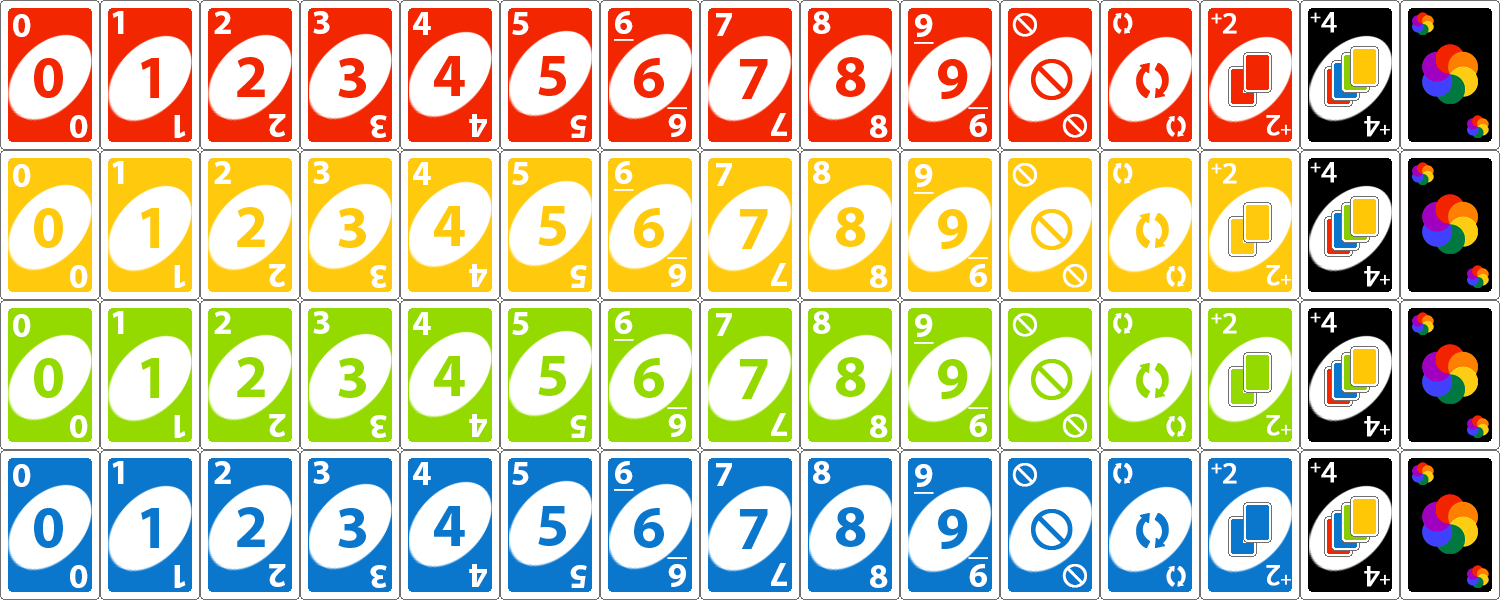
<style>
.page{position:relative;width:1500px;height:600px;background:#ffffff}
.page>*{position:absolute;margin:0}
.t1{font:60px "MyriadPro-Bold";color:#ffffff}
.t2{font:60px "MyriadPro-Bold";color:#ffffff;text-decoration:underline}
.t3{font:30px "MyriadPro-Regular";color:#ffffff;font-weight:bold}
</style>
<div class="page">
<p class="t1" style="left:13px;top:14px;width:18px;height:23px">0</p>
<p class="t1" style="left:112px;top:11px;width:12px;height:23px">1</p>
<p class="t1" style="left:214px;top:11px;width:17px;height:23px">2</p>
<p class="t1" style="left:313px;top:11px;width:17px;height:23px">3</p>
<p class="t1" style="left:413px;top:12px;width:18px;height:23px">4</p>
<p class="t1" style="left:512px;top:12px;width:17px;height:23px">5</p>
<p class="t2" style="left:614px;top:11px;width:20px;height:30px">6</p>
<p class="t1" style="left:716px;top:13px;width:16px;height:23px">7</p>
<p class="t1" style="left:813px;top:11px;width:18px;height:23px">8</p>
<p class="t2" style="left:914px;top:14px;width:20px;height:30px">9</p>
<p class="t3" style="left:1211px;top:13px;width:26px;height:21px">+2</p>
<p class="t2" style="left:667px;top:107px;width:20px;height:30px;rotate:180deg">6</p>
<p class="t1" style="left:771px;top:113px;width:16px;height:23px;rotate:180deg">7</p>
<p class="t2" style="left:968px;top:107px;width:20px;height:30px;rotate:180deg">9</p>
<p class="t1" style="left:70px;top:115px;width:18px;height:23px">0</p>
<p class="t1" style="left:174px;top:115px;width:12px;height:23px;rotate:180deg">1</p>
<p class="t1" style="left:269px;top:114px;width:17px;height:23px;rotate:180deg">2</p>
<p class="t1" style="left:370px;top:115px;width:17px;height:23px;rotate:180deg">3</p>
<p class="t1" style="left:469px;top:114px;width:18px;height:23px;rotate:180deg">4</p>
<p class="t1" style="left:570px;top:115px;width:17px;height:23px;rotate:180deg">5</p>
<p class="t1" style="left:870px;top:115px;width:18px;height:23px">8</p>
<p class="t3" style="left:1266px;top:115px;width:25px;height:21px;rotate:180deg">+2</p>
<p class="t1" style="left:112px;top:161px;width:12px;height:23px">1</p>
<p class="t1" style="left:214px;top:161px;width:17px;height:23px">2</p>
<p class="t1" style="left:313px;top:161px;width:17px;height:23px">3</p>
<p class="t2" style="left:614px;top:161px;width:20px;height:30px">6</p>
<p class="t1" style="left:813px;top:161px;width:18px;height:23px">8</p>
<p class="t1" style="left:13px;top:164px;width:18px;height:23px">0</p>
<p class="t1" style="left:413px;top:162px;width:18px;height:23px">4</p>
<p class="t1" style="left:512px;top:162px;width:17px;height:23px">5</p>
<p class="t1" style="left:716px;top:163px;width:16px;height:23px">7</p>
<p class="t2" style="left:914px;top:164px;width:20px;height:30px">9</p>
<p class="t3" style="left:1211px;top:163px;width:26px;height:21px">+2</p>
<p class="t2" style="left:667px;top:257px;width:20px;height:30px;rotate:180deg">6</p>
<p class="t2" style="left:968px;top:257px;width:20px;height:30px;rotate:180deg">9</p>
<p class="t1" style="left:70px;top:265px;width:18px;height:23px">0</p>
<p class="t1" style="left:174px;top:265px;width:12px;height:23px;rotate:180deg">1</p>
<p class="t1" style="left:269px;top:264px;width:17px;height:23px;rotate:180deg">2</p>
<p class="t1" style="left:370px;top:265px;width:17px;height:23px;rotate:180deg">3</p>
<p class="t1" style="left:469px;top:264px;width:18px;height:23px;rotate:180deg">4</p>
<p class="t1" style="left:570px;top:265px;width:17px;height:23px;rotate:180deg">5</p>
<p class="t1" style="left:771px;top:263px;width:16px;height:23px;rotate:180deg">7</p>
<p class="t1" style="left:870px;top:265px;width:18px;height:23px">8</p>
<p class="t3" style="left:1266px;top:265px;width:25px;height:21px;rotate:180deg">+2</p>
<p class="t1" style="left:13px;top:314px;width:18px;height:23px">0</p>
<p class="t1" style="left:112px;top:311px;width:12px;height:23px">1</p>
<p class="t1" style="left:214px;top:311px;width:17px;height:23px">2</p>
<p class="t1" style="left:313px;top:311px;width:17px;height:23px">3</p>
<p class="t1" style="left:413px;top:312px;width:18px;height:23px">4</p>
<p class="t1" style="left:512px;top:312px;width:17px;height:23px">5</p>
<p class="t2" style="left:614px;top:311px;width:20px;height:30px">6</p>
<p class="t1" style="left:716px;top:313px;width:16px;height:23px">7</p>
<p class="t1" style="left:813px;top:311px;width:18px;height:23px">8</p>
<p class="t2" style="left:914px;top:314px;width:20px;height:30px">9</p>
<p class="t3" style="left:1211px;top:313px;width:26px;height:21px">+2</p>
<p class="t1" style="left:269px;top:414px;width:17px;height:23px;rotate:180deg">2</p>
<p class="t1" style="left:469px;top:414px;width:18px;height:23px;rotate:180deg">4</p>
<p class="t2" style="left:667px;top:407px;width:20px;height:30px;rotate:180deg">6</p>
<p class="t1" style="left:771px;top:413px;width:16px;height:23px;rotate:180deg">7</p>
<p class="t2" style="left:968px;top:407px;width:20px;height:30px;rotate:180deg">9</p>
<p class="t1" style="left:70px;top:415px;width:18px;height:23px">0</p>
<p class="t1" style="left:174px;top:415px;width:12px;height:23px;rotate:180deg">1</p>
<p class="t1" style="left:370px;top:415px;width:17px;height:23px;rotate:180deg">3</p>
<p class="t1" style="left:570px;top:415px;width:17px;height:23px;rotate:180deg">5</p>
<p class="t1" style="left:870px;top:415px;width:18px;height:23px">8</p>
<p class="t3" style="left:1266px;top:415px;width:25px;height:21px;rotate:180deg">+2</p>
<p class="t1" style="left:112px;top:461px;width:12px;height:23px">1</p>
<p class="t1" style="left:214px;top:461px;width:17px;height:23px">2</p>
<p class="t1" style="left:313px;top:461px;width:17px;height:23px">3</p>
<p class="t1" style="left:413px;top:462px;width:18px;height:23px">4</p>
<p class="t1" style="left:512px;top:462px;width:17px;height:23px">5</p>
<p class="t2" style="left:614px;top:461px;width:20px;height:30px">6</p>
<p class="t1" style="left:813px;top:461px;width:18px;height:23px">8</p>
<p class="t1" style="left:13px;top:464px;width:18px;height:23px">0</p>
<p class="t1" style="left:716px;top:463px;width:16px;height:23px">7</p>
<p class="t2" style="left:914px;top:464px;width:20px;height:30px">9</p>
<p class="t3" style="left:1211px;top:463px;width:26px;height:21px">+2</p>
<p class="t2" style="left:667px;top:557px;width:20px;height:30px;rotate:180deg">6</p>
<p class="t2" style="left:968px;top:557px;width:20px;height:30px;rotate:180deg">9</p>
<p class="t1" style="left:70px;top:565px;width:18px;height:23px">0</p>
<p class="t1" style="left:174px;top:565px;width:12px;height:23px;rotate:180deg">1</p>
<p class="t1" style="left:269px;top:564px;width:17px;height:23px;rotate:180deg">2</p>
<p class="t1" style="left:370px;top:565px;width:17px;height:23px;rotate:180deg">3</p>
<p class="t1" style="left:469px;top:564px;width:18px;height:23px;rotate:180deg">4</p>
<p class="t1" style="left:570px;top:565px;width:17px;height:23px;rotate:180deg">5</p>
<p class="t1" style="left:771px;top:563px;width:16px;height:23px;rotate:180deg">7</p>
<p class="t1" style="left:870px;top:565px;width:18px;height:23px">8</p>
<p class="t3" style="left:1266px;top:565px;width:25px;height:21px;rotate:180deg">+2</p>
</div>
